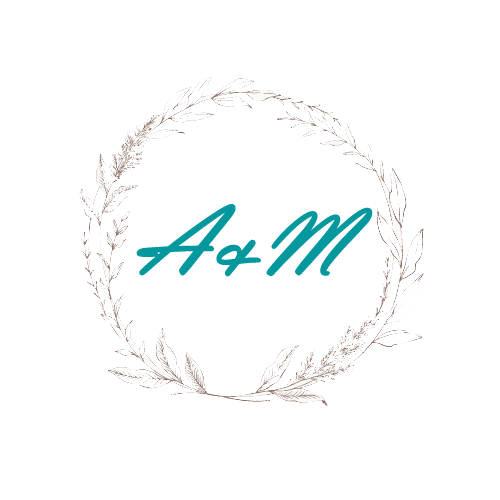
<style>
.page{position:relative;width:500px;height:500px;background:#ffffff}
.page>*{position:absolute;margin:0}
.t1{font:96px "VladimirScript";color:#03989e;font-weight:bold}
</style>
<div class="page">
<p class="t1" style="left:136px;top:204px;width:237px;height:73px">A&amp;M</p>
</div>
